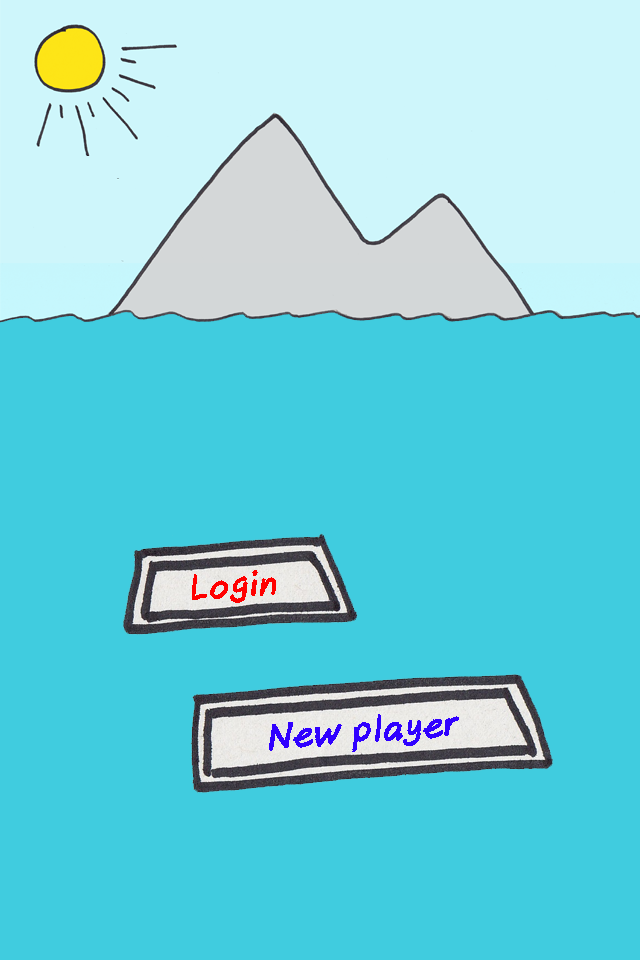
<style>
.page{position:relative;width:640px;height:960px;background:#40ccdf}
.page>*{position:absolute;margin:0}
.t1{font:33px "AxureHandwriting-BoldItalic";color:#ff0000}
.t2{font:36px "AxureHandwriting-BoldItalic";color:#3000ff}
</style>
<div class="page">
<p class="t1" style="left:192px;top:570px;width:84px;height:33px;rotate:-3deg">Login</p>
<p class="t2" style="left:269px;top:714px;width:190px;height:38px;rotate:-4deg">New player</p>
</div>
